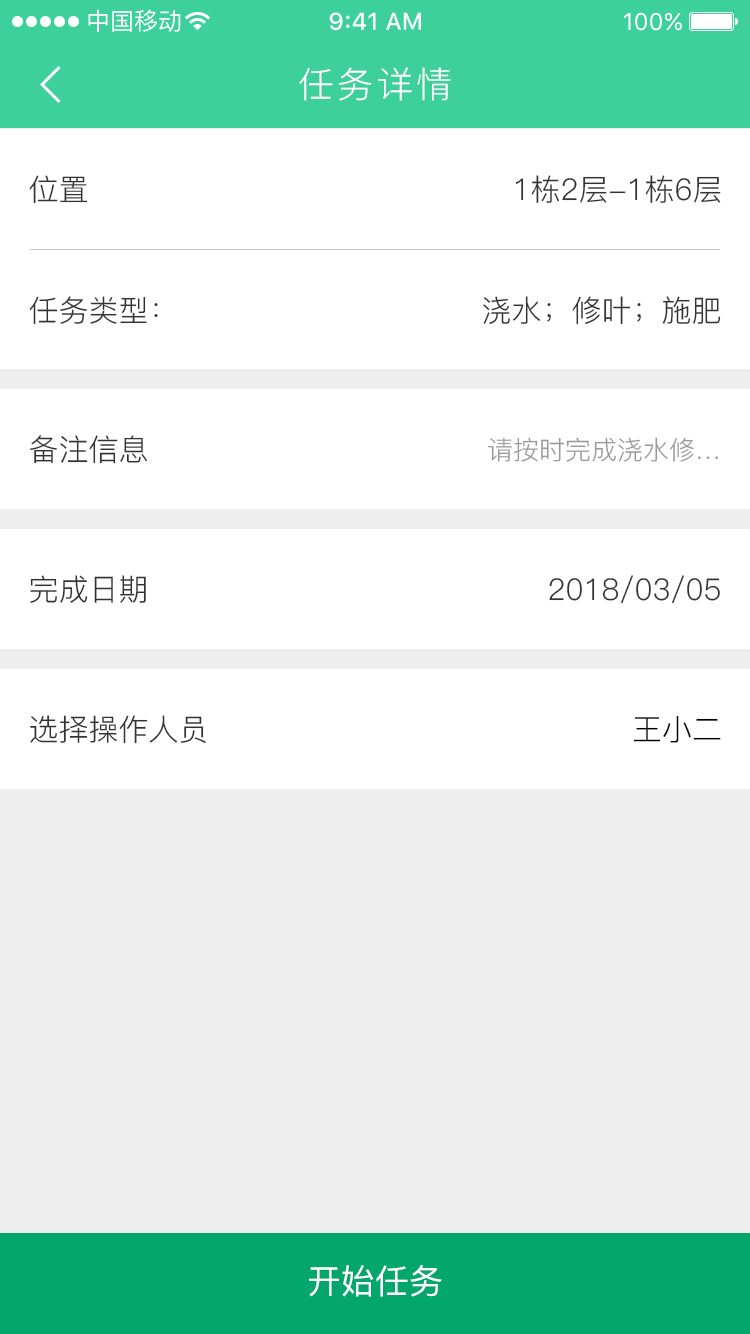
<style>
.page{position:relative;width:750px;height:1334px;background:#ffffff}
.page>*{position:absolute;margin:0}
.t1{font:36px "PingFang-SC-Regular";letter-spacing:0.1em;color:#ffffff}
.t2{font:30px "PingFang-SC-Regular";color:#333333}
.t3{font:26px "PingFang-SC-Regular";color:#999999}
.t4{font:30px "PingFang-SC-Regular";color:#000000}
.t5{font:34px "PingFang-SC-Medium";color:#ffffff}
</style>
<div class="page">
<p class="t1" style="left:299px;top:67px;width:152px;height:34px">任务详情</p>
<p class="t2" style="left:29px;top:175px;width:59px;height:29px">位置</p>
<p class="t2" style="left:515px;top:175px;width:206px;height:28px">1栋2层-1栋6层</p>
<p class="t2" style="left:29px;top:296px;width:129px;height:29px">任务类型：</p>
<p class="t2" style="left:483px;top:296px;width:238px;height:29px">浇水；修叶；施肥</p>
<p class="t2" style="left:30px;top:435px;width:118px;height:29px">备注信息</p>
<p class="t3" style="left:488px;top:437px;width:230px;height:25px">请按时完成浇水修…</p>
<p class="t2" style="left:30px;top:575px;width:116px;height:28px">完成日期</p>
<p class="t2" style="left:549px;top:575px;width:171px;height:29px">2018/03/05</p>
<p class="t2" style="left:30px;top:715px;width:176px;height:29px">选择操作人员</p>
<p class="t4" style="left:633px;top:715px;width:88px;height:28px">王小二</p>
<p class="t5" style="left:309px;top:1265px;width:133px;height:32px">开始任务</p>
</div>
